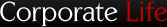
<style>
.page{position:relative;width:167px;height:27px}
.page>*{position:absolute;margin:0}
.t1{font:28px "CentabelBook";color:#ffffff}
.t2{font:28px "CentabelBook";color:#c00000}
</style>
<div class="page">
<p class="t1" style="left:0px;top:1px;width:167px;height:26px">Corporate <span class="t2">Life</span></p>
</div>
